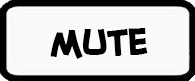
<style>
.page{position:relative;width:195px;height:81px;background:#fafafa}
.page>*{position:absolute;margin:0}
.t1{font:38px "CreativeBlockBBBold";letter-spacing:-0.05em;color:#000000}
</style>
<div class="page">
<p class="t1" style="left:50px;top:28px;width:98px;height:31px">mute</p>
</div>
